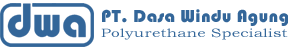
<style>
.page{position:relative;width:288px;height:49px;background:#ffffff}
.page>*{position:absolute;margin:0}
.t1{font:18px "Bauhaus93";letter-spacing:0.02em;color:#336699}
.t2{font:12px "BookmanOldStyle";letter-spacing:0.02em;color:#336699;scale:1.3 1}
</style>
<div class="page">
<p class="t1" style="left:102px;top:9px;width:187px;height:17px">PT. Dasa Windu Agung</p>
<p class="t2" style="left:101px;top:28px;width:187px;height:12px">Polyurethane Specialist</p>
</div>
